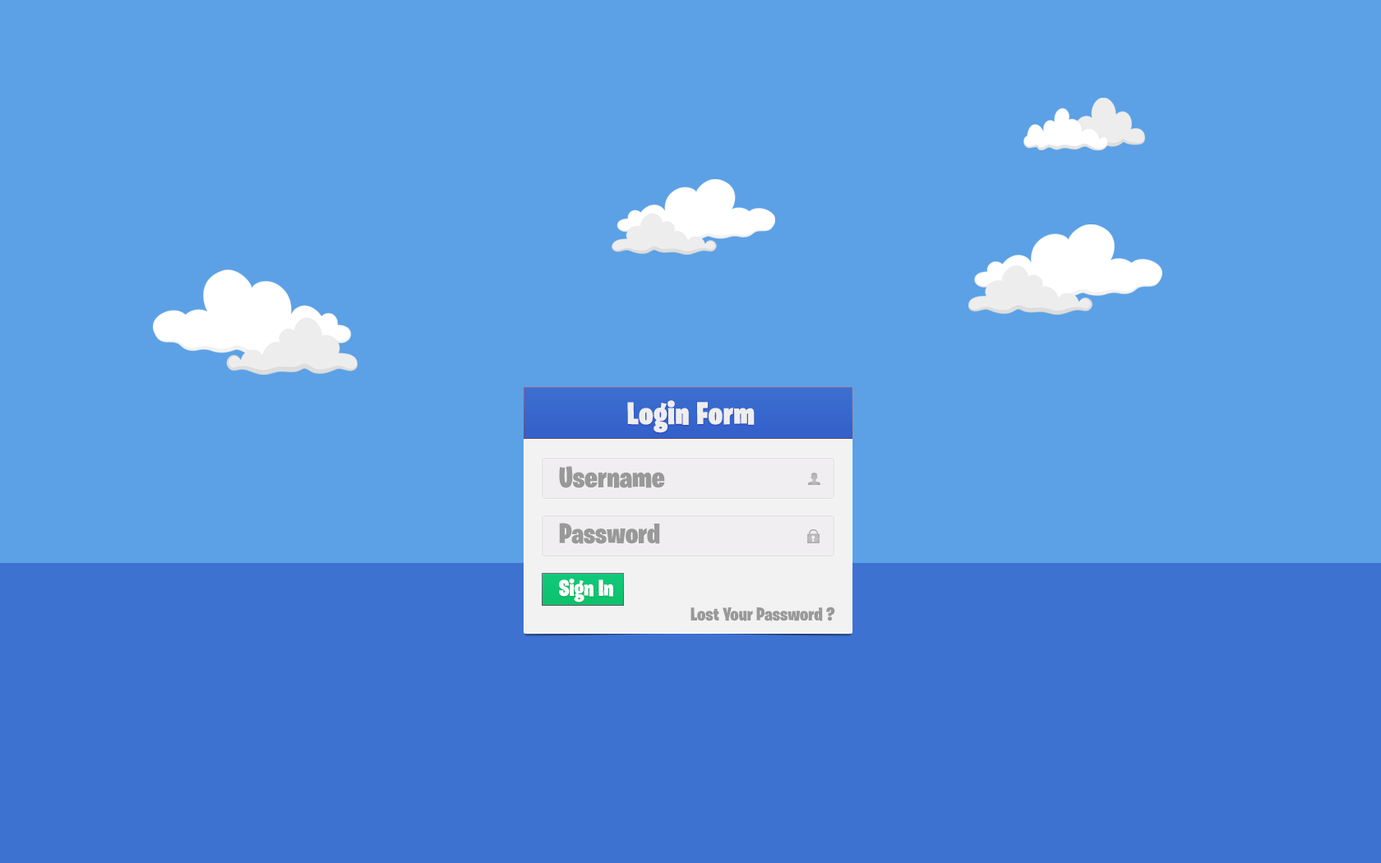
<style>
.page{position:relative;width:1381px;height:863px;background:#5ca1e5}
.page>*{position:absolute;margin:0}
.t1{font:31.2px "BurbankBigCondensed-Black";color:#eeeeee;font-weight:bold}
.t2{font:29.6px "BurbankBigCondensed-Black";color:#999999}
.t3{font:28.8px "BurbankBigCondensed-Black";color:#999999}
.t4{font:23px "BurbankBigCondensed-Black";color:#ffffff}
.t5{font:18.9px "BurbankBigCondensed-Black";color:#999999}
</style>
<div class="page">
<p class="t1" style="left:627px;top:400px;width:128px;height:33px">Login Form</p>
<p class="t2" style="left:559px;top:466px;width:106px;height:22px">Username</p>
<p class="t3" style="left:559px;top:523px;width:101px;height:21px">Password</p>
<p class="t4" style="left:559px;top:579px;width:54px;height:24px">sign In</p>
<p class="t5" style="left:691px;top:607px;width:144px;height:15px">Lost Your Password ?</p>
</div>
